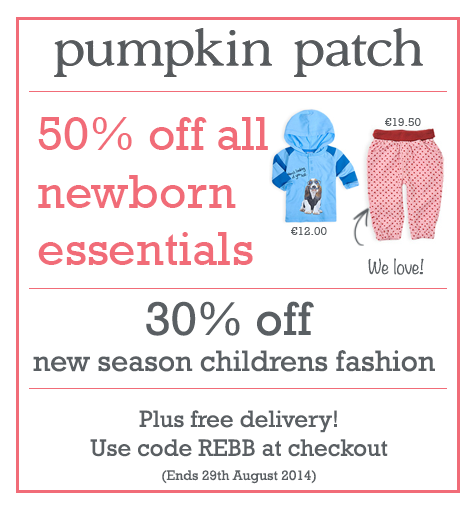
<style>
.page{position:relative;width:476px;height:510px;background:#ffffff}
.page>*{position:absolute;margin:0}
.t1{font:48px "Rockwell";color:#f16c78}
.t2{font:12px "Rockwell";color:#5a5f63}
.t3{font:18px "Noteworthy-Light";color:#5a5f63}
.t4{font:30px "Rockwell";color:#5a5f63}
.t5{font:48px "Rockwell";color:#5a5f63}
.t6{font:24px "Rockwell";color:#5a5f63}
.t7{font:14px "Rockwell";color:#5a5f63}
</style>
<div class="page">
<p class="t1" style="left:38px;top:117px;width:230px;height:148px">50% off all <br>newborn <br>essentials</p>
<p class="t2" style="left:385px;top:118px;width:36px;height:8px">€19.50</p>
<p class="t2" style="left:291px;top:227px;width:36px;height:8px">€12.00</p>
<p class="t3" style="left:368px;top:258px;width:56px;height:17px">We love!</p>
<p class="t4" style="left:33px;top:301px;width:402px;height:71px;text-align:center"><span class="t5">30% off <br></span>new season childrens fashion</p>
<p class="t6" style="left:90px;top:410px;width:298px;height:47px;text-align:center">Plus free delivery!<br>Use code REBB at checkout</p>
<p class="t7" style="left:162px;top:470px;width:154px;height:14px">(Ends 29th August 2014)</p>
</div>
